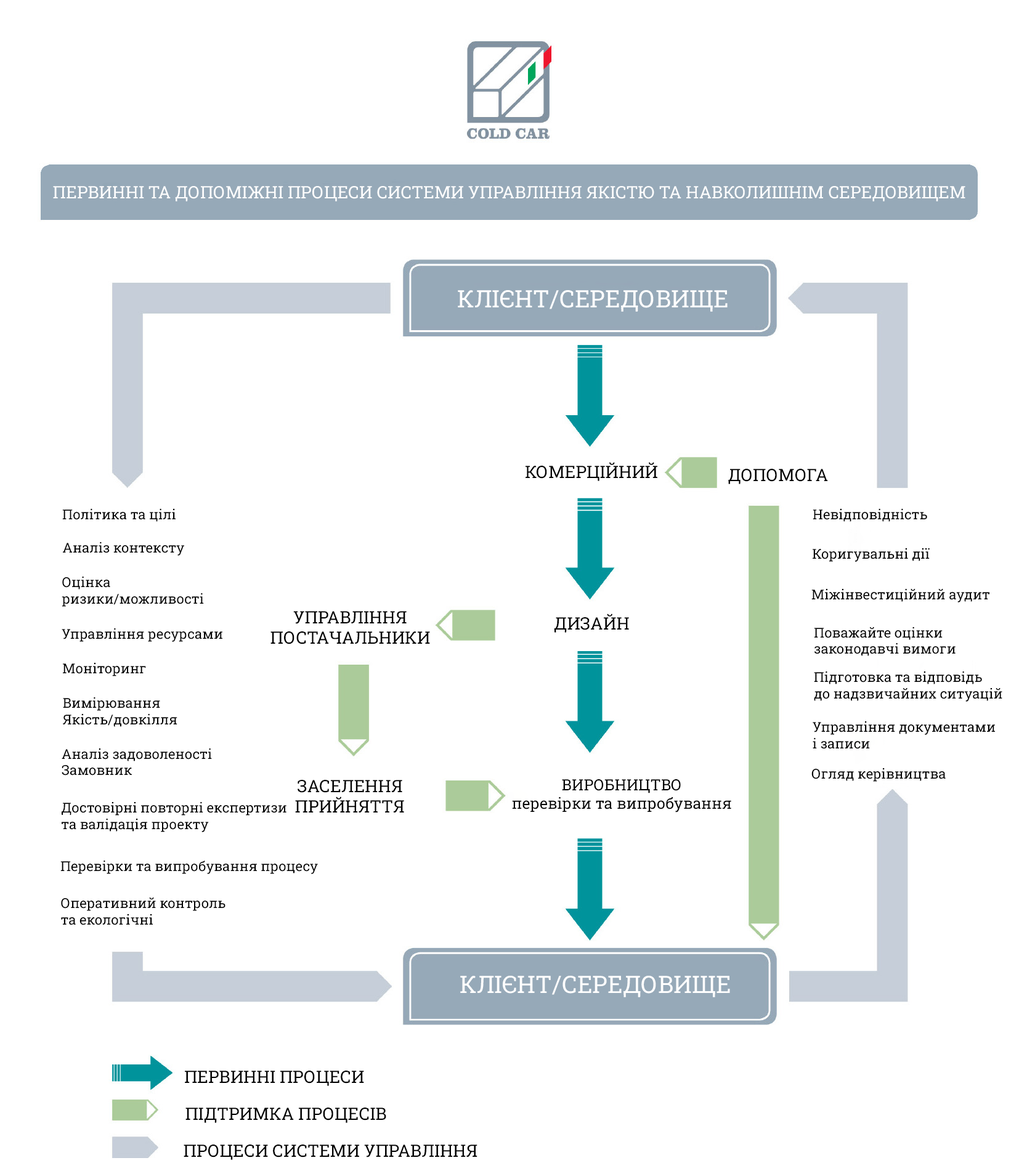
<style>
.page{position:relative;width:1019px;height:1171px;background:#ffffff}
.page>*{position:absolute;margin:0}
.t1{font:17.1px "RobotoSlab-Regular";color:#fefefe}
.t2{font:23.9px "RobotoSlab-Regular";color:#fefefe}
.t3{font:17.1px "RobotoSlab-Regular";color:#000000}
.t4{font:13.7px "RobotoSlab-Regular";color:#000000}
.t5{font:15.4px "RobotoSlab-Regular";color:#000000}
</style>
<div class="page">
<p class="t1" style="left:53px;top:186px;width:912px;height:15px">ПЕРВИННІ ТА ДОПОМІЖНІ ПРОЦЕСИ СИСТЕМИ УПРАВЛІННЯ ЯКІСТЮ ТА НАВКОЛИШНІМ СЕРЕДОВИЩЕМ</p>
<p class="t2" style="left:458px;top:290px;width:269px;height:22px">КЛІЄНТ/СЕРЕДОВИЩЕ</p>
<p class="t3" style="left:525px;top:462px;width:132px;height:19px">КОМЕРЦІЙНИЙ</p>
<p class="t3" style="left:728px;top:469px;width:100px;height:15px">ДОПОМОГА</p>
<p class="t4" style="left:62px;top:509px;width:114px;height:13px">Політика та цілі</p>
<p class="t4" style="left:812px;top:509px;width:115px;height:13px">Невідповідність</p>
<p class="t4" style="left:63px;top:542px;width:121px;height:13px">Аналіз контексту</p>
<p class="t4" style="left:812px;top:548px;width:117px;height:14px">Коригувальні дії</p>
<p class="t4" style="left:62px;top:576px;width:142px;height:31px">Оцінка<br>ризики/можливості</p>
<p class="t4" style="left:811px;top:589px;width:178px;height:13px">Міжінвестиційний аудит</p>
<p class="t3" style="left:270px;top:611px;width:160px;height:33px;text-align:center">УПРАВЛІННЯ<br>ПОСТАЧАЛЬНИКИ</p>
<p class="t3" style="left:554px;top:613px;width:75px;height:19px">ДИЗАЙН</p>
<p class="t4" style="left:62px;top:628px;width:160px;height:14px">Управління ресурсами</p>
<p class="t4" style="left:814px;top:627px;width:141px;height:29px">Поважайте оцінки<br>законодавчі вимоги</p>
<p class="t4" style="left:63px;top:663px;width:83px;height:13px">Моніторинг</p>
<p class="t4" style="left:814px;top:671px;width:188px;height:30px">Підготовка та відповідь<br>до надзвичайних ситуацій</p>
<p class="t4" style="left:63px;top:697px;width:114px;height:30px">Вимірювання<br>Якість/довкілля</p>
<p class="t4" style="left:812px;top:721px;width:183px;height:28px">Управління документами<br>і записи</p>
<p class="t4" style="left:62px;top:748px;width:150px;height:27px">Аналіз задоволеності<br>Замовник</p>
<p class="t4" style="left:811px;top:768px;width:134px;height:13px">Огляд керівництва</p>
<p class="t3" style="left:295px;top:780px;width:109px;height:32px;text-align:center">ЗАСЕЛЕННЯ<br>ПРИЙНЯТТЯ</p>
<p class="t5" style="left:512px;top:779px;width:219px;height:33px;text-align:center">ВИРОБНИЦТВО<br>перевірки та випробування</p>
<p class="t4" style="left:61px;top:802px;width:225px;height:30px">Достовірні повторні експертизи<br>та валідація проекту</p>
<p class="t4" style="left:60px;top:860px;width:258px;height:14px">Перевірки та випробування процесу</p>
<p class="t4" style="left:61px;top:897px;width:164px;height:28px">Оперативний контроль<br>та екологічні</p>
<p class="t2" style="left:460px;top:975px;width:270px;height:22px">КЛІЄНТ/СЕРЕДОВИЩЕ</p>
<p class="t3" style="left:185px;top:1070px;width:179px;height:16px">ПЕРВИННІ ПРОЦЕСИ</p>
<p class="t3" style="left:185px;top:1107px;width:201px;height:16px">ПІДТРИМКА ПРОЦЕСІВ</p>
<p class="t3" style="left:184px;top:1144px;width:293px;height:16px">ПРОЦЕСИ СИСТЕМИ УПРАВЛІННЯ</p>
</div>
